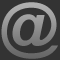
<style>
.page{position:relative;width:60px;height:60px;background:#333333}
.page>*{position:absolute;margin:0}
.t1{font:60px "ArialRoundedMTBold";letter-spacing:-0.1em}
</style>
<div class="page">
<p class="t1" style="left:1px;top:2px;width:57px;height:57px">@</p>
</div>
